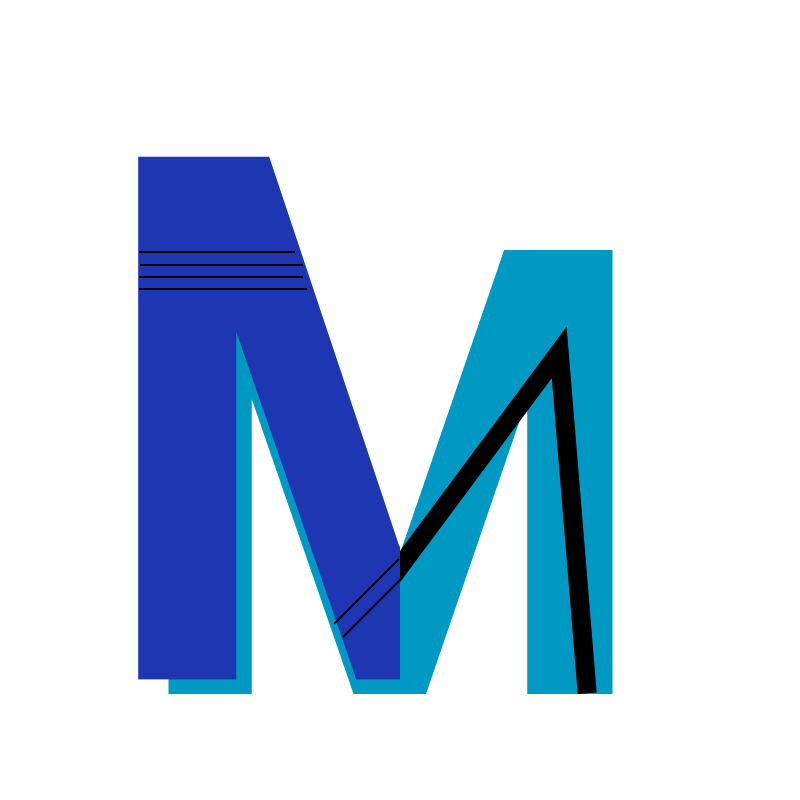
<style>
.page{position:relative;width:800px;height:800px;background:#ffffff}
.page>*{position:absolute;margin:0}
.t1{font:622px "AktivGroteskCorp-Bold"}
</style>
<div class="page">
<p class="t1" style="left:168px;top:250px;width:445px;height:444px">M</p>
</div>
